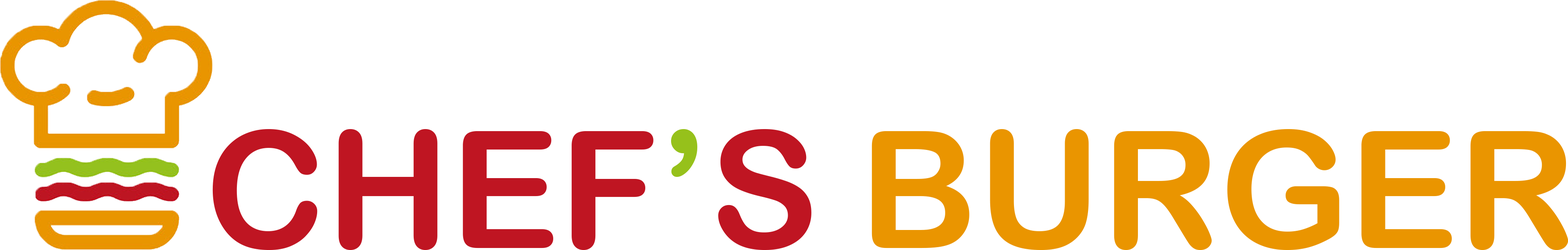
<style>
.page{position:relative;width:1568px;height:250px;background:#ffffff}
.page>*{position:absolute;margin:0}
.t1{font:163.7px "ArialRoundedMTBold";color:#ea9500}
.t2{font:163.7px "ArialRoundedMTBold";color:#bf1522}
.t3{font:163.7px "ArialRoundedMTBold";color:#96c11b}
</style>
<div class="page">
<p class="t1" style="left:212px;top:129px;width:1356px;height:121px"><span class="t2">CHEF</span><span class="t3">’</span><span class="t2">S </span>BURGER</p>
</div>
